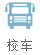
<style>
.page{position:relative;width:40px;height:55px;background:#ffffff}
.page>*{position:absolute;margin:0}
.t1{font:22.5px "SimSun";letter-spacing:0.075em;color:#666666;font-variant:small-caps}
</style>
<div class="page">
<p class="t1" style="left:7px;top:39px;width:25px;height:12px">校车</p>
</div>
